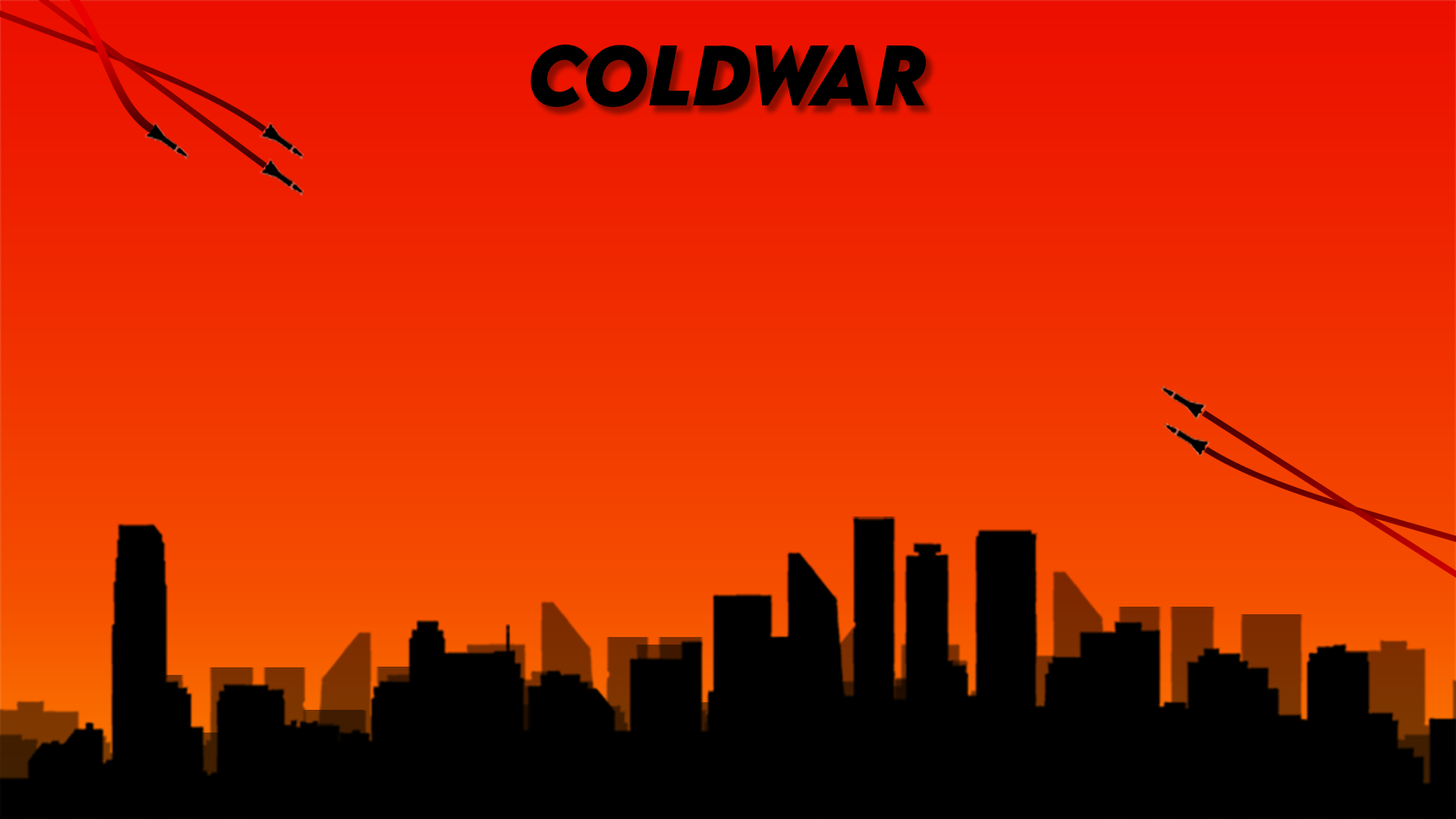
<style>
.page{position:relative;width:1456px;height:819px}
.page>*{position:absolute;margin:0}
.t1{font:75.8px "LEMONMILK-BoldItalic";color:#000000}
</style>
<div class="page">
<p class="t1" style="left:530px;top:44px;width:396px;height:64px">Coldwar</p>
</div>
